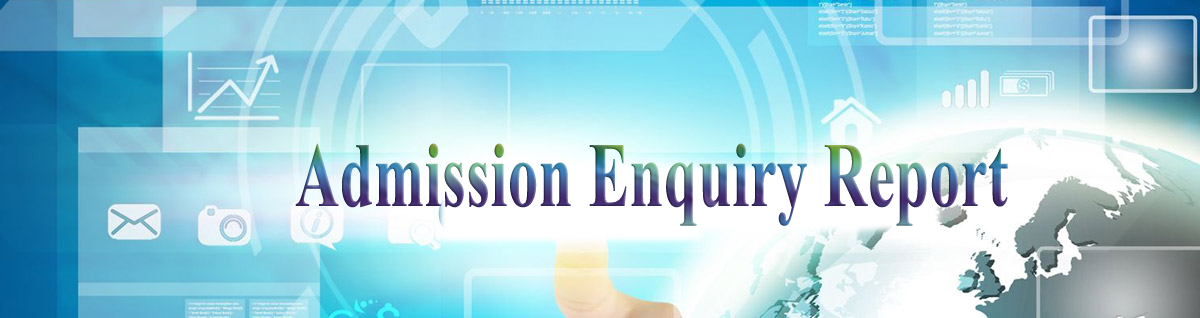
<style>
.page{position:relative;width:1200px;height:318px}
.page>*{position:absolute;margin:0}
.t1{font:91.8px "TimesNewRomanPS-BoldMT";letter-spacing:0.01em;scale:0.66 1}
</style>
<div class="page">
<p class="t1" style="left:295px;top:143px;width:713px;height:83px">Admission Enquiry Report</p>
</div>
